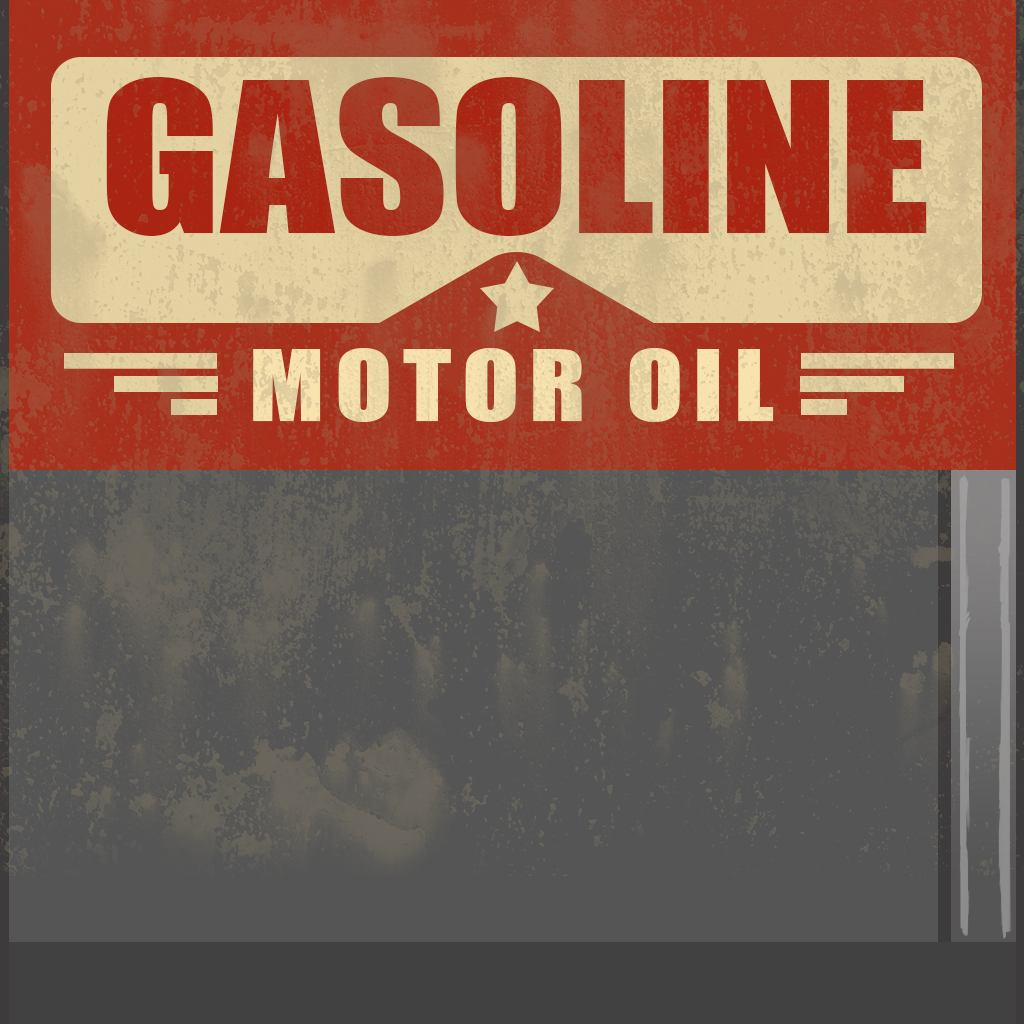
<style>
.page{position:relative;width:1024px;height:1024px;background:#555555}
.page>*{position:absolute;margin:0}
.t1{font:193px "Impact";color:#a92412;scale:1.15 1}
.t2{font:91.4px "Impact";letter-spacing:0.1em;color:#f8e3af;scale:1.15 1}
</style>
<div class="page">
<p class="t1" style="left:106px;top:77px;width:821px;height:159px">GASOLINE</p>
<p class="t2" style="left:253px;top:348px;width:521px;height:74px">MOTOR OIL</p>
</div>
